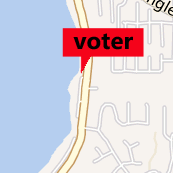
<style>
.page{position:relative;width:173px;height:173px;background:#b5ceef}
.page>*{position:absolute;margin:0}
.t1{font:24px "SegoeWP-Bold";color:#030000}
</style>
<div class="page">
<p class="t1" style="left:73px;top:33px;width:60px;height:17px">voter</p>
</div>
